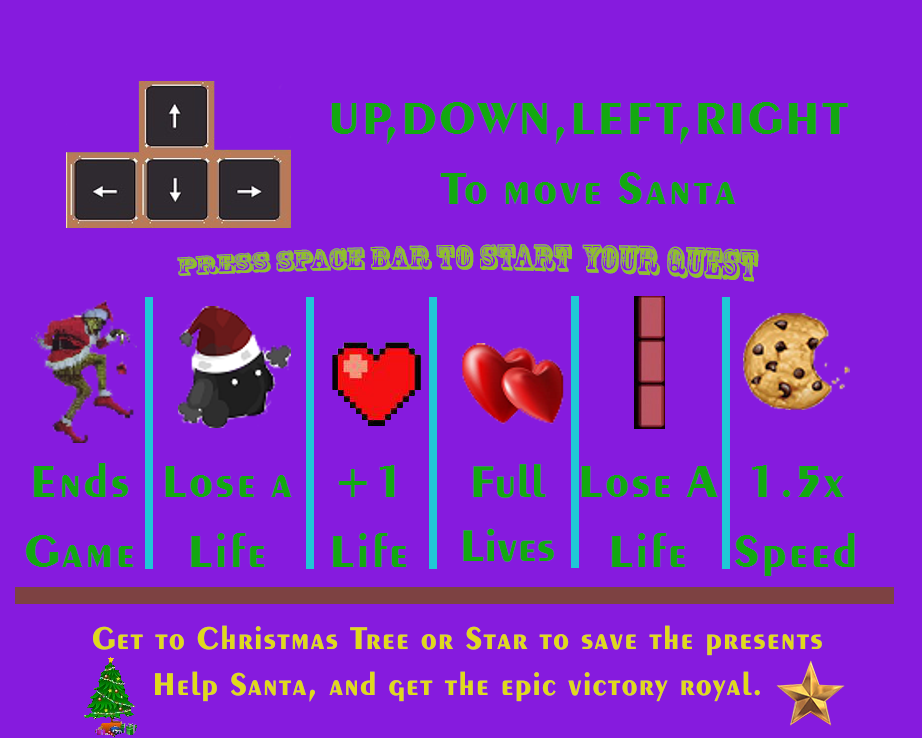
<style>
.page{position:relative;width:922px;height:738px;background:#861bde}
.page>*{position:absolute;margin:0}
.t1{font:47px/17px "MyriadPro-Regular";color:#13a810}
.t2{font:33px "RosewoodStd-Regular";color:#90bf2b}
.t3{font:33px/25px "MyriadPro-Regular";color:#e0d91b;scale:0.96 1}
</style>
<div class="page">
<p class="t1" style="left:331px;top:102px;width:518px;height:102px;text-align:center">UP,DOWN,LEFT,RIGHT<br>To move Santa</p>
<p class="t2" style="left:177px;top:244px;width:582px;height:38px">PRESS SPACE BAR TO START  YOUR QUEST</p>
<p class="t1" style="left:25px;top:463px;width:109px;height:104px;text-align:center">Ends<br>Game</p>
<p class="t1" style="left:165px;top:466px;width:127px;height:101px;text-align:center">Lose a<br>Life</p>
<p class="t1" style="left:332px;top:465px;width:75px;height:102px;text-align:center">+1<br>Life</p>
<p class="t1" style="left:463px;top:464px;width:91px;height:98px;text-align:center">Full<br>Lives</p>
<p class="t1" style="left:581px;top:466px;width:137px;height:101px;text-align:center">Lose A<br>Life</p>
<p class="t1" style="left:734px;top:465px;width:121px;height:111px;text-align:center">1.5x<br>Speed</p>
<p class="t3" style="left:93px;top:625px;width:729px;height:77px;text-align:center">Get to Christmas Tree or Star to save the presents<br>Help Santa, and get the epic victory royal.</p>
</div>
